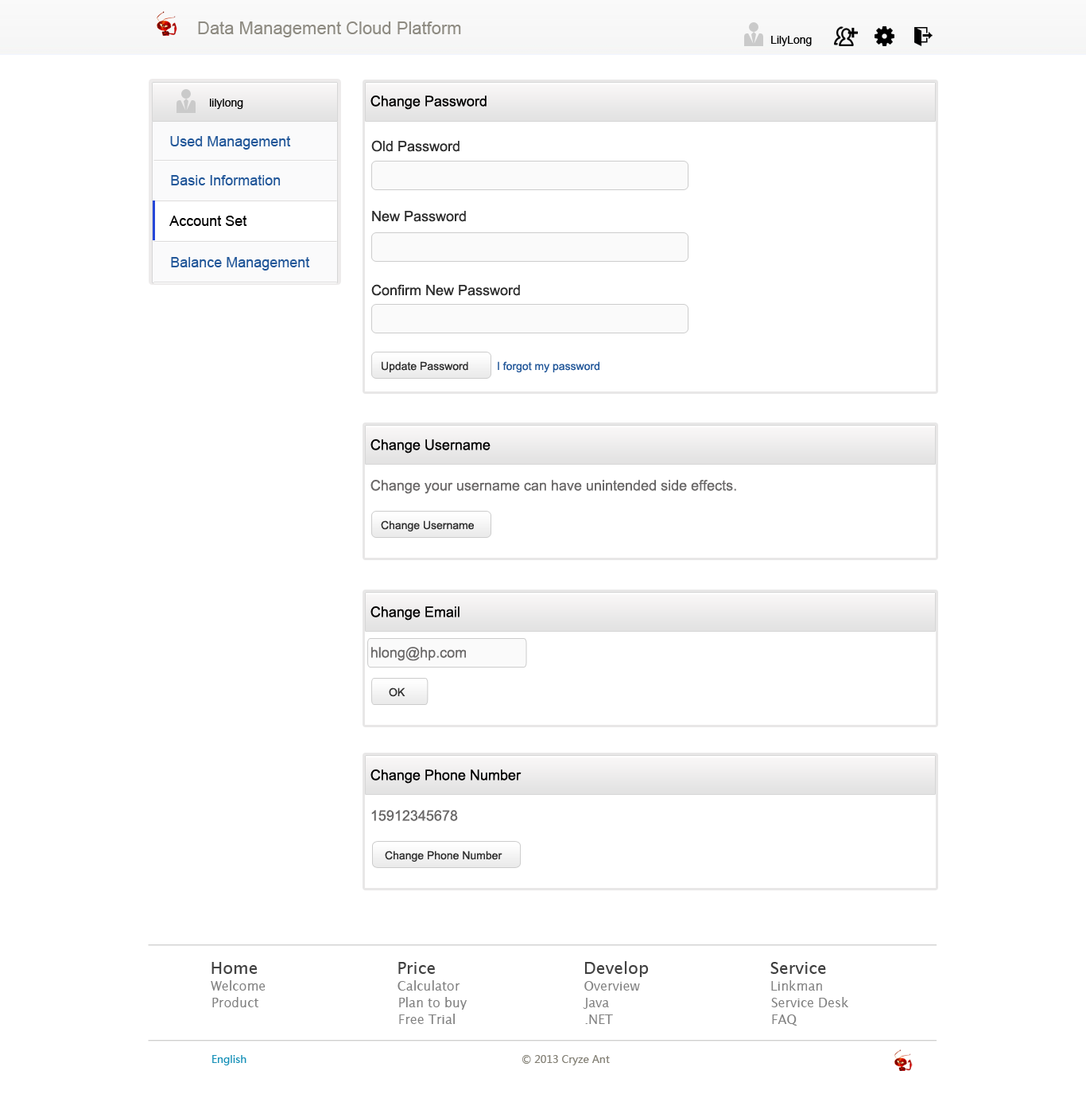
<style>
.page{position:relative;width:1086px;height:1098px;background:#ffffff}
.page>*{position:absolute;margin:0}
.t1{font:17.5px "ArialMT";color:#8e8b82}
.t2{font:11.1px "ArialMT";color:#000000}
.t3{font:14.3px "ArialMT";color:#000000}
.t4{font:14.3px "ArialMT";color:#225799}
.t5{font:14.3px "ArialMT";color:#2e2e2e}
.t6{font:11.1px "ArialMT";color:#2e2e2e}
.t7{font:11.1px "ArialMT";color:#225799}
.t8{font:14.3px "ArialMT";color:#6a6868}
.t9{font:16.7px "LucidaSans";color:#404040}
.t10{font:16.7px "LucidaSans";color:#3f3f3f}
.t11{font:12.7px "LucidaSans";color:#818181}
.t12{font:10.3px "MicrosoftYaHei";color:#1791b8}
.t13{font:10.3px "MicrosoftYaHei";color:#827f74}
</style>
<div class="page">
<p class="t1" style="left:198px;top:21px;width:263px;height:16px">Data Management Cloud Platform</p>
<p class="t2" style="left:771px;top:36px;width:41px;height:10px">LilyLong</p>
<p class="t2" style="left:210px;top:99px;width:33px;height:10px">lilylong</p>
<p class="t3" style="left:371px;top:95px;width:116px;height:15px">Change Password</p>
<p class="t4" style="left:170px;top:136px;width:121px;height:14px">Used Management</p>
<p class="t5" style="left:371px;top:140px;width:89px;height:12px">Old Password</p>
<p class="t4" style="left:171px;top:175px;width:110px;height:10px">Basic Information</p>
<p class="t3" style="left:169px;top:216px;width:78px;height:10px">Account Set</p>
<p class="t5" style="left:372px;top:211px;width:94px;height:11px">New Password</p>
<p class="t4" style="left:171px;top:257px;width:139px;height:13px">Balance Management</p>
<p class="t5" style="left:371px;top:284px;width:149px;height:12px">Confirm New Password</p>
<p class="t6" style="left:382px;top:361px;width:86px;height:11px">Update Password</p>
<p class="t7" style="left:498px;top:361px;width:102px;height:11px">I forgot my password</p>
<p class="t3" style="left:371px;top:439px;width:120px;height:14px">Change Username</p>
<p class="t8" style="left:371px;top:480px;width:365px;height:14px">Change your username can have unintended side effects.</p>
<p class="t6" style="left:381px;top:520px;width:93px;height:11px">Change Username</p>
<p class="t3" style="left:371px;top:606px;width:89px;height:14px">Change Email</p>
<p class="t8" style="left:371px;top:647px;width:95px;height:14px">hlong@hp.com</p>
<p class="t6" style="left:389px;top:687px;width:17px;height:10px">OK</p>
<p class="t3" style="left:371px;top:769px;width:151px;height:14px">Change Phone Number</p>
<p class="t8" style="left:371px;top:810px;width:87px;height:11px">15912345678</p>
<p class="t6" style="left:385px;top:850px;width:118px;height:11px">Change Phone Number</p>
<p class="t9" style="left:212px;top:962px;width:46px;height:11px">Home</p>
<p class="t10" style="left:398px;top:962px;width:37px;height:11px">Price</p>
<p class="t9" style="left:585px;top:961px;width:64px;height:16px">Develop</p>
<p class="t10" style="left:771px;top:962px;width:55px;height:11px">Service</p>
<p class="t11" style="left:211px;top:980px;width:55px;height:10px">Welcome</p>
<p class="t11" style="left:398px;top:980px;width:63px;height:10px">Calculator</p>
<p class="t11" style="left:585px;top:981px;width:55px;height:9px">Overview</p>
<p class="t11" style="left:771px;top:980px;width:51px;height:10px">Linkman</p>
<p class="t11" style="left:212px;top:997px;width:46px;height:10px">Product</p>
<p class="t11" style="left:399px;top:997px;width:68px;height:12px">Plan to buy</p>
<p class="t11" style="left:583px;top:997px;width:26px;height:11px">Java</p>
<p class="t11" style="left:771px;top:997px;width:78px;height:10px">Service Desk</p>
<p class="t11" style="left:399px;top:1013px;width:56px;height:11px">Free Trial</p>
<p class="t11" style="left:585px;top:1014px;width:28px;height:10px">.NET</p>
<p class="t11" style="left:772px;top:1014px;width:26px;height:12px">FAQ</p>
<p class="t12" style="left:212px;top:1055px;width:35px;height:10px">English</p>
<p class="t13" style="left:523px;top:1055px;width:87px;height:10px">© 2013 Cryze Ant</p>
</div>
